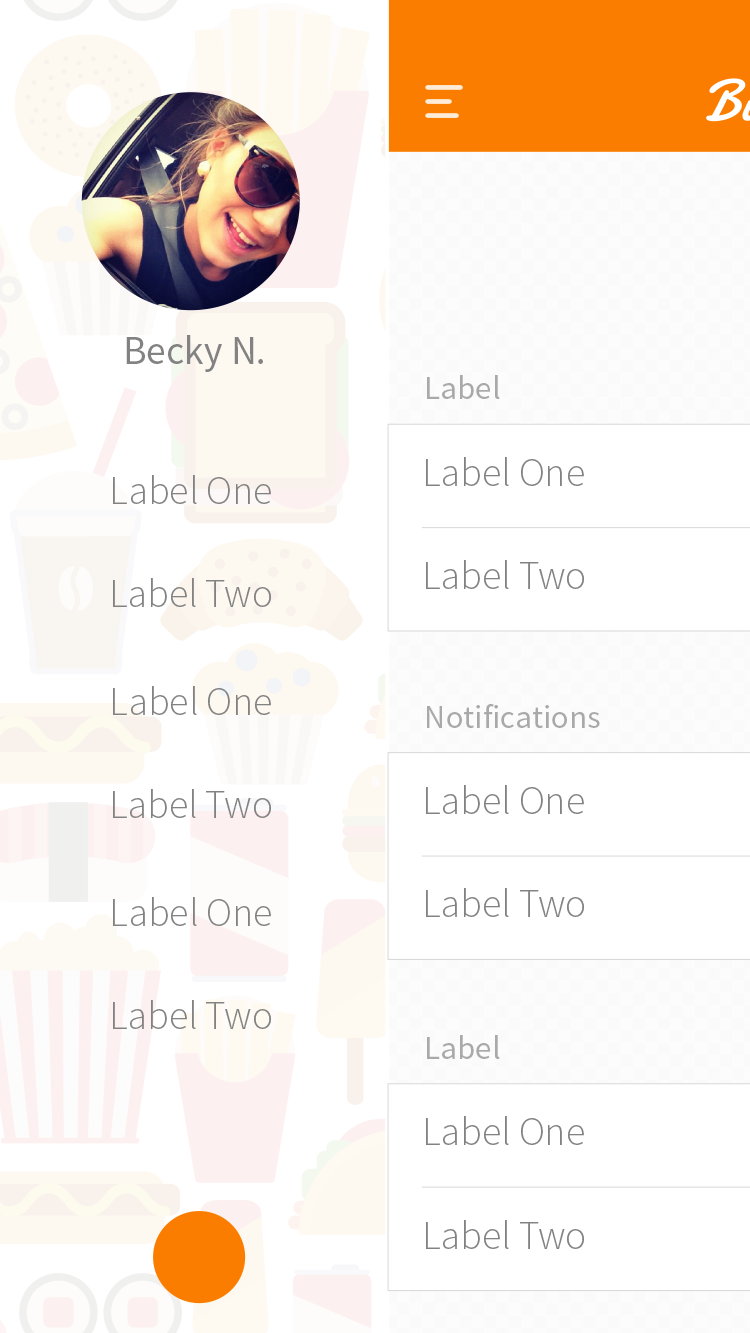
<style>
.page{position:relative;width:750px;height:1333px;background:#ffffff}
.page>*{position:absolute;margin:0}
.t1{font:39.8px "SourceSansPro-Regular";color:#828282}
.t2{font:32.9px "SourceSansPro-Regular";color:#a9a9a9}
.t3{font:39.9px "SourceSansPro-Light";color:#828282}
.t4{font:39.9px "SourceSansPro-Light";letter-spacing:-0.039em;color:#828282}
</style>
<div class="page">
<p class="t1" style="left:126px;top:335px;width:137px;height:37px">Becky N.</p>
<p class="t2" style="left:427px;top:375px;width:73px;height:24px">Label</p>
<p class="t3" style="left:426px;top:457px;width:158px;height:29px">Label One</p>
<p class="t3" style="left:113px;top:475px;width:158px;height:29px">Label One</p>
<p class="t3" style="left:426px;top:560px;width:158px;height:29px">Label <span class="t4">T</span>wo</p>
<p class="t3" style="left:113px;top:578px;width:158px;height:29px">Label <span class="t4">T</span>wo</p>
<p class="t3" style="left:113px;top:686px;width:158px;height:29px">Label One</p>
<p class="t2" style="left:427px;top:704px;width:173px;height:24px">Notifications</p>
<p class="t3" style="left:426px;top:785px;width:158px;height:29px">Label One</p>
<p class="t3" style="left:113px;top:789px;width:158px;height:29px">Label <span class="t4">T</span>wo</p>
<p class="t3" style="left:426px;top:888px;width:158px;height:29px">Label <span class="t4">T</span>wo</p>
<p class="t3" style="left:113px;top:897px;width:158px;height:29px">Label One</p>
<p class="t3" style="left:113px;top:1000px;width:158px;height:29px">Label <span class="t4">T</span>wo</p>
<p class="t2" style="left:427px;top:1035px;width:73px;height:24px">Label</p>
<p class="t3" style="left:426px;top:1116px;width:158px;height:29px">Label One</p>
<p class="t3" style="left:426px;top:1220px;width:158px;height:29px">Label <span class="t4">T</span>wo</p>
</div>
